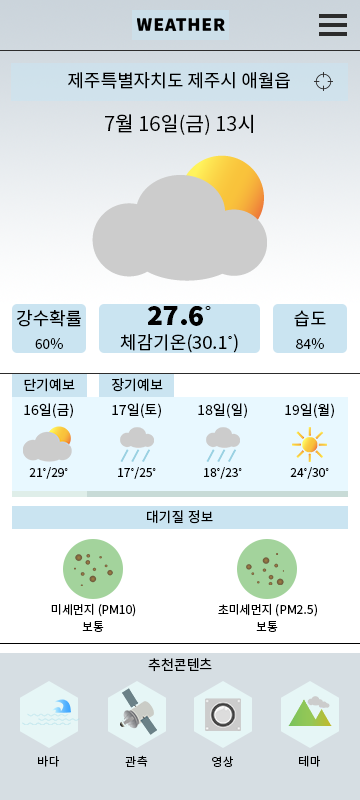
<style>
.page{position:relative;width:360px;height:800px}
.page>*{position:absolute;margin:0}
.t1{font:18px "NotoSansKR-Regular";color:#000000}
.t2{font:20px "NotoSansKR-Regular";color:#000000}
.t3{font:18px/24px "NotoSansKR-Regular";color:#000000}
.t4{font:14px/24px "NotoSansKR-Regular";color:#000000}
.t5{font:26px/24px "NotoSansKR-Black";color:#000000}
.t6{font:26px/24px "Gulim";color:#000000}
.t7{font:18px/24px "Gulim";color:#000000}
.t8{font:14px "NotoSansKR-Regular";color:#000000}
.t9{font:12px "NotoSansKR-Regular";color:#000000}
.t10{font:12px "Gulim";color:#000000}
</style>
<div class="page">
<p class="t1" style="left:68px;top:72px;width:222px;height:17px">제주특별자치도 제주시 애월읍</p>
<p class="t2" style="left:105px;top:114px;width:148px;height:21px">7월 16일(금) 13시</p>
<p class="t3" style="left:17px;top:309px;width:64px;height:40px;text-align:center">강수확률<br><span class="t4">60%</span></p>
<p class="t3" style="left:120px;top:306px;width:118px;height:47px;text-align:center"><span class="t5">27.6</span><span class="t6">˚<br></span>체감기온(30.1<span class="t7">˚</span>)</p>
<p class="t4" style="left:294px;top:310px;width:32px;height:39px;text-align:center"><span class="t3">습도<br></span>84%</p>
<p class="t8" style="left:24px;top:378px;width:51px;height:14px">단기예보</p>
<p class="t8" style="left:112px;top:378px;width:51px;height:14px">장기예보</p>
<p class="t8" style="left:24px;top:403px;width:49px;height:15px">16일(금)</p>
<p class="t8" style="left:112px;top:403px;width:49px;height:15px">17일(토)</p>
<p class="t8" style="left:198px;top:403px;width:49px;height:15px">18일(일)</p>
<p class="t8" style="left:285px;top:403px;width:49px;height:15px">19일(월)</p>
<p class="t9" style="left:29px;top:467px;width:39px;height:12px">21<span class="t10">˚</span>/29<span class="t10">˚</span></p>
<p class="t9" style="left:118px;top:467px;width:38px;height:12px">17<span class="t10">˚</span>/25<span class="t10">˚</span></p>
<p class="t9" style="left:204px;top:467px;width:38px;height:12px">18<span class="t10">˚</span>/23<span class="t10">˚</span></p>
<p class="t9" style="left:290px;top:467px;width:39px;height:12px">24<span class="t10">˚</span>/30<span class="t10">˚</span></p>
<p class="t8" style="left:147px;top:510px;width:66px;height:14px">대기질 정보</p>
<p class="t9" style="left:51px;top:603px;width:85px;height:14px">미세먼지 (PM10)</p>
<p class="t9" style="left:218px;top:603px;width:99px;height:14px">초미세먼지 (PM2.5)</p>
<p class="t9" style="left:82px;top:621px;width:22px;height:11px">보통</p>
<p class="t9" style="left:256px;top:621px;width:22px;height:11px">보통</p>
<p class="t8" style="left:148px;top:658px;width:64px;height:14px">추천콘텐츠</p>
<p class="t9" style="left:38px;top:755px;width:21px;height:12px">바다</p>
<p class="t9" style="left:125px;top:755px;width:23px;height:12px">관측</p>
<p class="t9" style="left:212px;top:756px;width:21px;height:11px">영상</p>
<p class="t9" style="left:299px;top:755px;width:21px;height:12px">테마</p>
</div>
